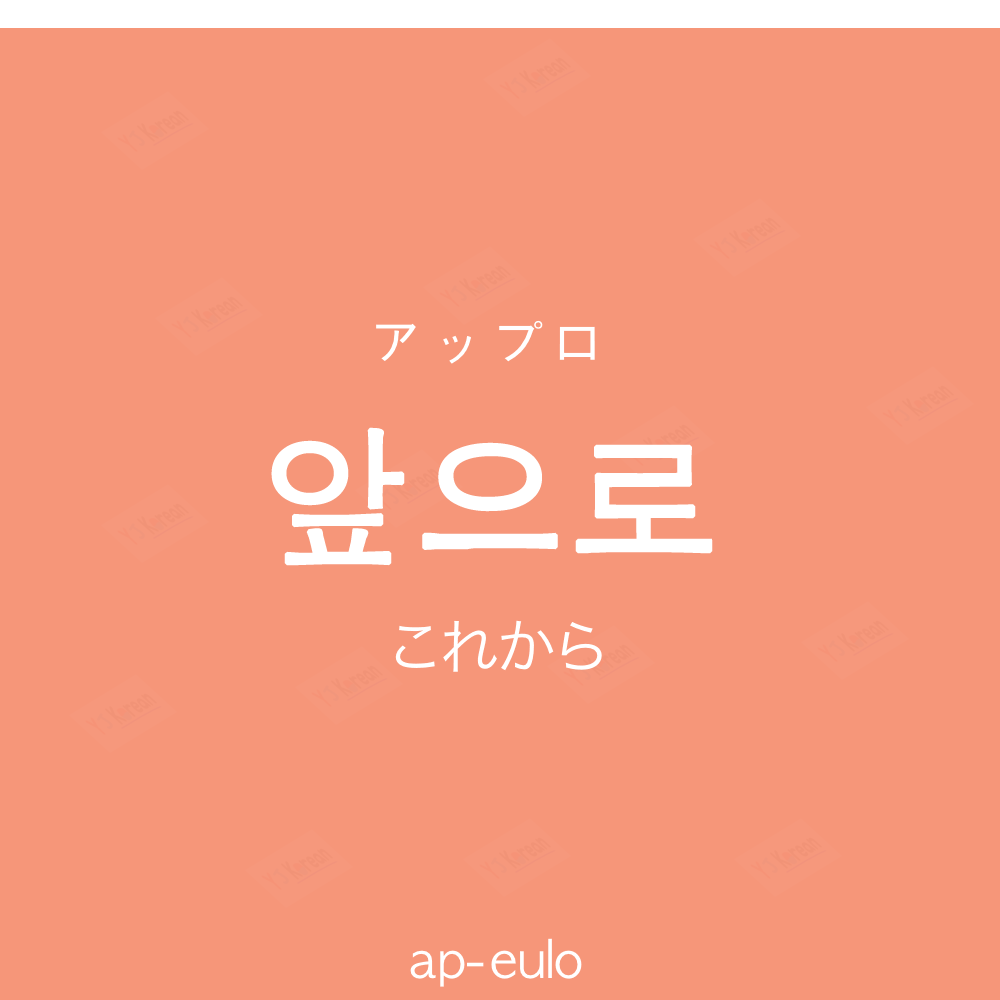
<style>
.page{position:relative;width:1000px;height:1000px;background:#f69679}
.page>*{position:absolute;margin:0}
.t1{font:60px "AppleGothic";color:#ffffff}
.t2{font:150px "AppleGothic";color:#ffffff;font-weight:bold}
.t3{font:60px "HiraKakuProN-W3";color:#ffffff}
.t4{font:50px "AppleGothic";color:#ffffff}
</style>
<div class="page">
<p class="t1" style="left:376px;top:320px;width:219px;height:44px">アップロ</p>
<p class="t2" style="left:271px;top:427px;width:442px;height:139px">앞으로</p>
<p class="t3" style="left:395px;top:620px;width:207px;height:52px">これから</p>
<p class="t4" style="left:410px;top:938px;width:172px;height:49px">ap-eulo</p>
</div>
